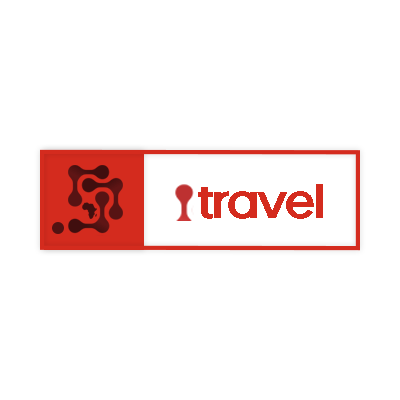
<style>
.page{position:relative;width:400px;height:400px;background:#ffffff}
.page>*{position:absolute;margin:0}
.t1{font:42.7px "Progress-Regular";letter-spacing:-0.033em;color:#d42b1e;scale:1.16 1}
</style>
<div class="page">
<p class="t1" style="left:198px;top:184px;width:125px;height:35px">travel</p>
</div>
